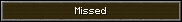
<style>
.page{position:relative;width:182px;height:22px}
.page>*{position:absolute;margin:0}
.t1{font:8px "Minecraft";color:#ffffff}
</style>
<div class="page">
<p class="t1" style="left:75px;top:7px;width:31px;height:7px">Missed</p>
</div>
